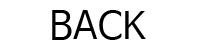
<style>
.page{position:relative;width:200px;height:50px;background:#ffffff}
.page>*{position:absolute;margin:0}
.t1{font:38px "NanumBarunGothic";color:#000000}
</style>
<div class="page">
<p class="t1" style="left:52px;top:10px;width:94px;height:30px">BACK</p>
</div>
